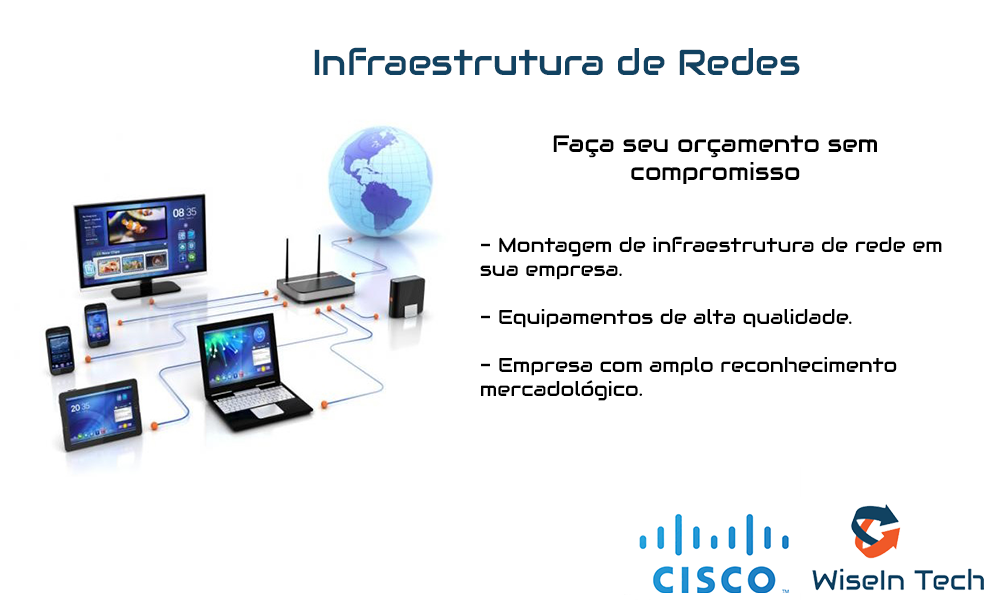
<style>
.page{position:relative;width:1000px;height:600px;background:#ffffff}
.page>*{position:absolute;margin:0}
.t1{font:36px "Audiowide-Regular";color:#114261}
.t2{font:20px "Audiowide-Regular";color:#000000}
.t3{font:24px "Audiowide-Regular";color:#000000}
</style>
<div class="page">
<p class="t1" style="left:314px;top:47px;width:486px;height:28px">Infraestrutura de Redes</p>
<p class="t2" style="left:480px;top:135px;width:462px;height:266px;text-align:center"><span class="t3">Faça seu orçamento sem compromisso<br></span><br><br>- Montagem de infraestrutura de rede em sua empresa.<br><br>- Equipamentos de alta qualidade.<br><br>- Empresa com amplo reconhecimento mercadológico.</p>
</div>
